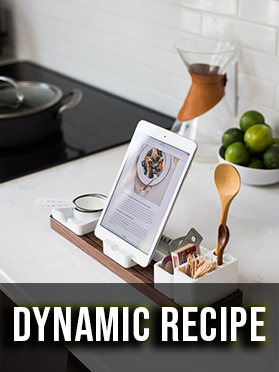
<style>
.page{position:relative;width:279px;height:372px}
.page>*{position:absolute;margin:0}
.t1{font:48px "BebasNeue-Regular";letter-spacing:0.025em;color:#ffffff}
</style>
<div class="page">
<p class="t1" style="left:14px;top:307px;width:252px;height:34px">Dynamic Recipe</p>
</div>
